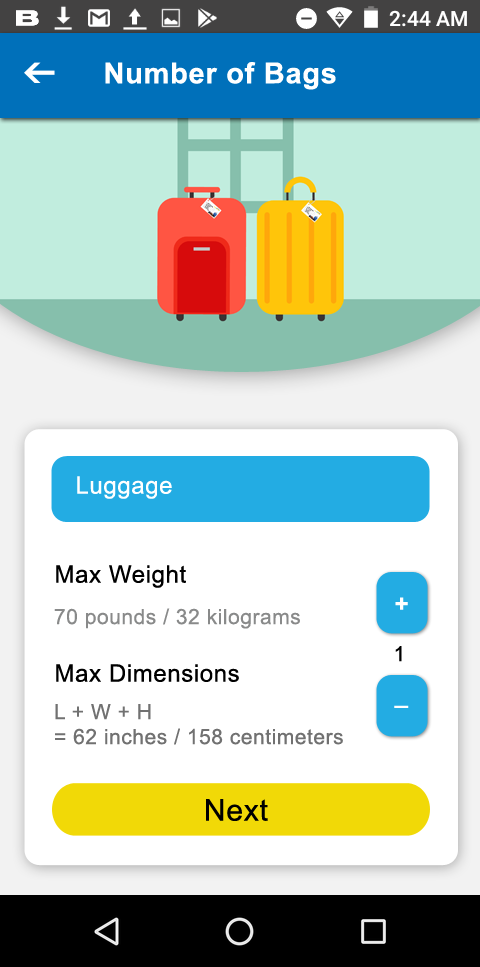
<style>
.page{position:relative;width:480px;height:967px;background:#ffffff}
.page>*{position:absolute;margin:0}
.t1{font:29px "Arial-BoldMT";letter-spacing:0.025em;color:#ffffff}
.t2{font:24px "ArialMT";letter-spacing:0.025em;color:#ffffff}
.t3{font:24px/33px "ArialMT";letter-spacing:0.025em;color:#000000}
.t4{font:24px "Arial-BoldMT";letter-spacing:0.025em;color:#ffffff}
.t5{font:21px "ArialMT";letter-spacing:0.025em;color:#898a8a}
.t6{font:21px "ArialMT";letter-spacing:0.025em;color:#000000}
.t7{font:21px/25px "ArialMT";letter-spacing:0.025em;color:#717171}
.t8{font:30px "ArialMT";letter-spacing:0.025em;color:#000000}
</style>
<div class="page">
<p class="t1" style="left:105px;top:62px;width:231px;height:28px">Number of Bags</p>
<p class="t2" style="left:77px;top:476px;width:95px;height:23px">Luggage</p>
<p class="t3" style="left:56px;top:565px;width:183px;height:117px">Max Weight<br><br><br>Max Dimensions</p>
<p class="t4" style="left:395px;top:597px;width:13px;height:13px">+</p>
<p class="t5" style="left:54px;top:608px;width:246px;height:21px">70 pounds / 32 kilograms</p>
<p class="t6" style="left:395px;top:646px;width:7px;height:16px">1</p>
<p class="t7" style="left:55px;top:704px;width:288px;height:41px">L + W + H <br>= 62 inches / 158 centimeters</p>
<p class="t4" style="left:394px;top:705px;width:15px;height:3px">_</p>
<p class="t8" style="left:206px;top:799px;width:62px;height:22px">Next</p>
</div>
